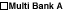
<style>
.page{position:relative;width:80px;height:12px;background:#ffffff}
.page>*{position:absolute;margin:0}
.t1{font:9px "Helvetica-Bold";color:#000000}
</style>
<div class="page">
<p class="t1" style="left:9px;top:2px;width:54px;height:7px">Multi Bank A</p>
</div>
